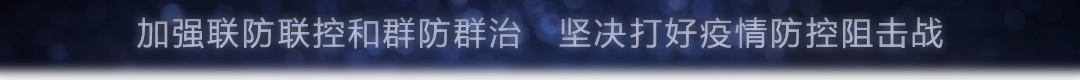
<style>
.page{position:relative;width:1080px;height:80px}
.page>*{position:absolute;margin:0}
.t1{font:32px "MicrosoftYaHei";letter-spacing:0.1em;color:#a4acc9}
</style>
<div class="page">
<p class="t1" style="left:137px;top:17px;width:806px;height:32px">加强联防联控和群防群治　坚决打好疫情防控阻击战</p>
</div>
